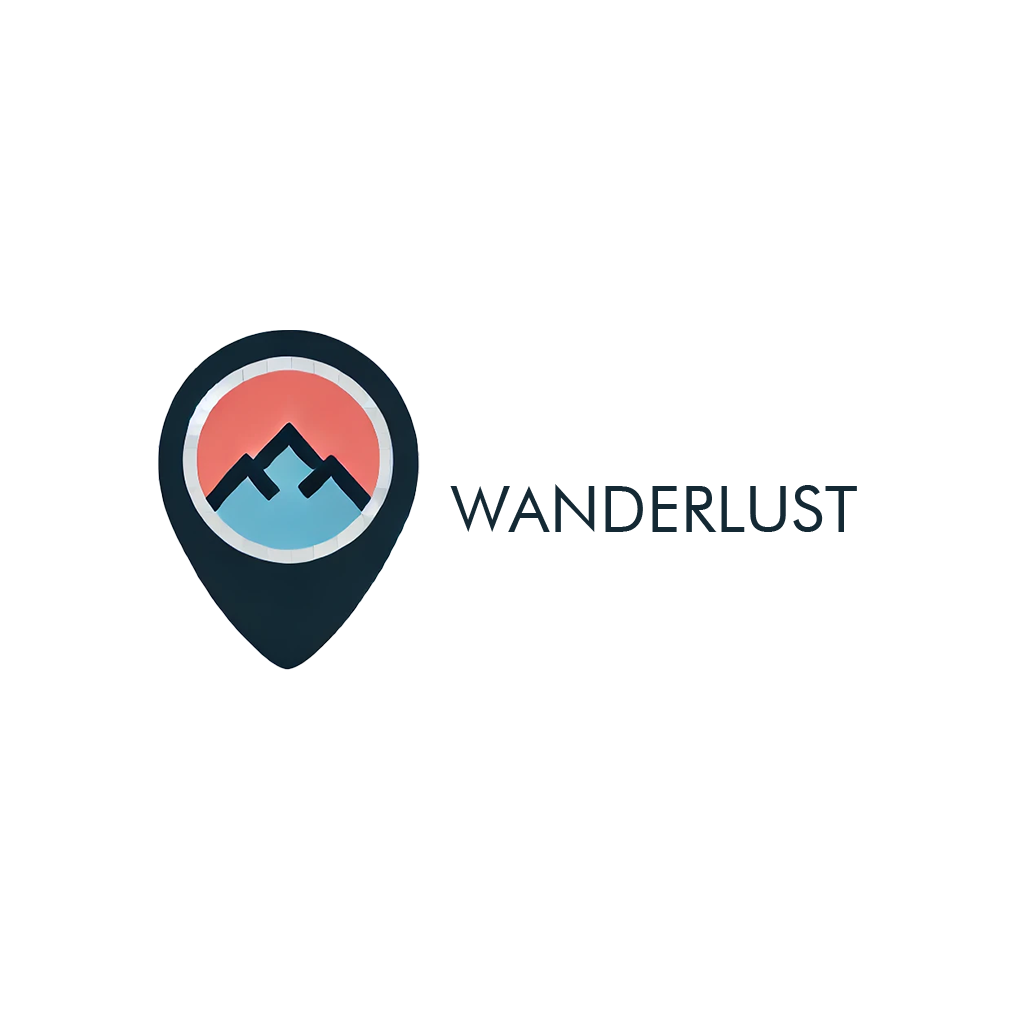
<style>
.page{position:relative;width:1024px;height:1024px;background:#ffffff}
.page>*{position:absolute;margin:0}
.t1{font:64px "FuturaBT-Book";letter-spacing:0.01em;color:#142934;text-transform:uppercase}
</style>
<div class="page">
<p class="t1" style="left:450px;top:484px;width:407px;height:48px">WanderLust</p>
</div>
